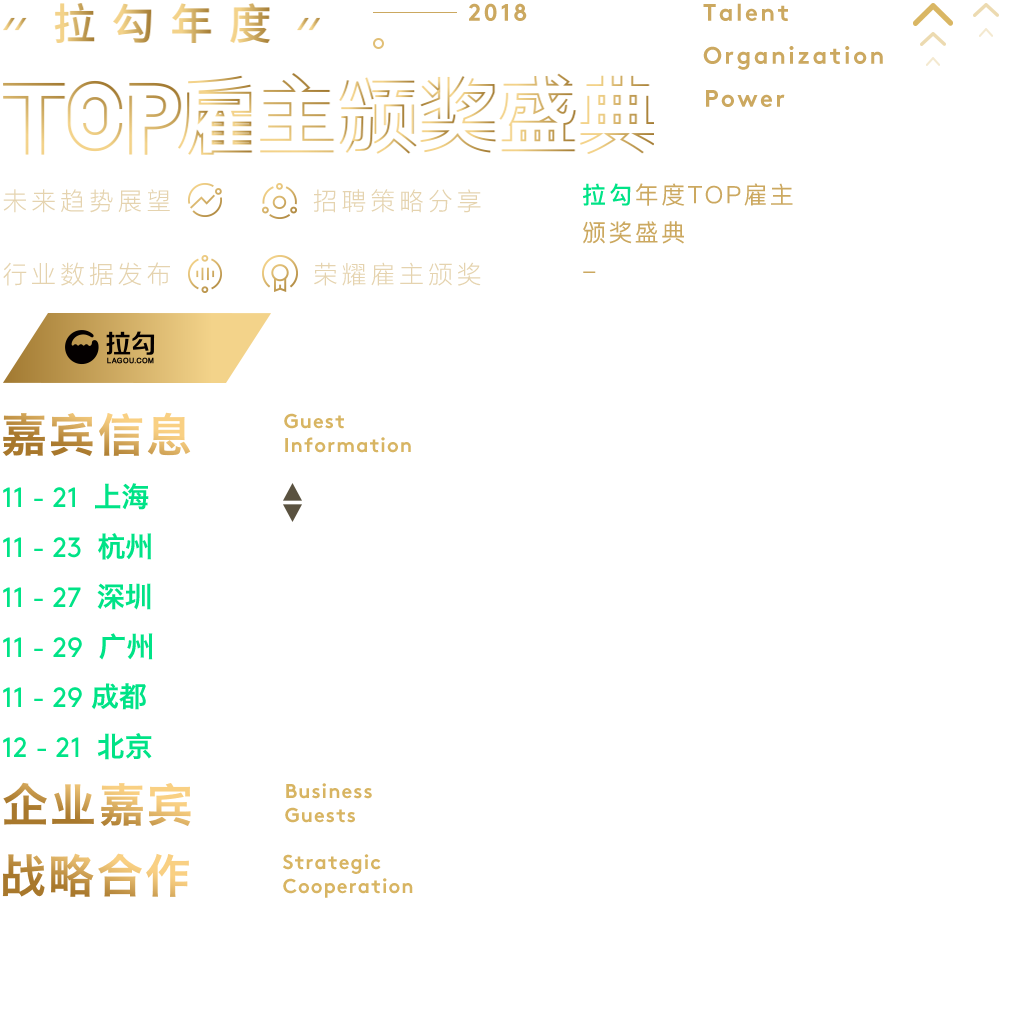
<style>
.page{position:relative;width:1024px;height:1024px;background:#ffffff}
.page>*{position:absolute;margin:0}
.t1{font:24px "Brown-Bold";letter-spacing:0.1em;color:#c6a96a}
.t2{font:24px/37.7px "PingFangSC-Regular";letter-spacing:0.1em;color:#cba85f}
.t3{font:24px/37.7px "PingFangSC-Medium";letter-spacing:0.1em;color:#00e387}
.t4{font:24.4px/36.5px "FZLTXHK--GBK1-0";letter-spacing:0.2em;color:#e5d3af;text-transform:uppercase}
.t5{font:46px "HiraginoSansGB-W6";letter-spacing:0.05em}
.t6{font:20px/24px "Brown-Bold";letter-spacing:0.05em;color:#d8b562}
.t7{font:28px "Brown-Regular";color:#00e387}
.t8{font:28px "HiraginoSansGB-W6";color:#00e387}
.t9{font:20px/24px "Brown-Bold";letter-spacing:0.05em;color:#d2b56e}
</style>
<div class="page">
<p class="t1" style="left:469px;top:3px;width:58px;height:18px">2018</p>
<p class="t1" style="left:703px;top:3px;width:85px;height:18px">Talent</p>
<p class="t1" style="left:703px;top:46px;width:180px;height:24px">Organization</p>
<p class="t1" style="left:706px;top:90px;width:79px;height:17px">Power</p>
<p class="t2" style="left:583px;top:183px;width:210px;height:90px"><span class="t3">拉勾</span>年度TOP雇主<br>颁奖盛典<br>-</p>
<p class="t4" style="left:3px;top:189px;width:478px;height:97px;text-align:center">未来趋势展望            招聘策略分享<br><br>行业数据发布            荣耀雇主颁奖</p>
<p class="t5" style="left:2px;top:412px;width:189px;height:44px">嘉宾信息</p>
<p class="t6" style="left:284px;top:413px;width:127px;height:40px">Guest<br>Information</p>
<p class="t7" style="left:3px;top:483px;width:146px;height:27px">11 - 21  <span class="t8">上海</span></p>
<p class="t7" style="left:3px;top:533px;width:148px;height:27px">11 - 23  <span class="t8">杭州</span></p>
<p class="t7" style="left:3px;top:583px;width:148px;height:27px">11 - 27  <span class="t8">深圳</span></p>
<p class="t7" style="left:3px;top:633px;width:150px;height:27px">11 - 29  <span class="t8">广州</span></p>
<p class="t7" style="left:3px;top:683px;width:143px;height:27px">11 - 29 <span class="t8">成都</span></p>
<p class="t7" style="left:3px;top:733px;width:149px;height:27px">12 - 21  <span class="t8">北京</span></p>
<p class="t5" style="left:3px;top:782px;width:188px;height:44px">企业嘉宾</p>
<p class="t9" style="left:285px;top:783px;width:87px;height:40px">Business<br>Guests</p>
<p class="t5" style="left:2px;top:853px;width:187px;height:44px">战略合作</p>
<p class="t9" style="left:283px;top:854px;width:130px;height:44px">Strategic<br>Cooperation</p>
</div>
